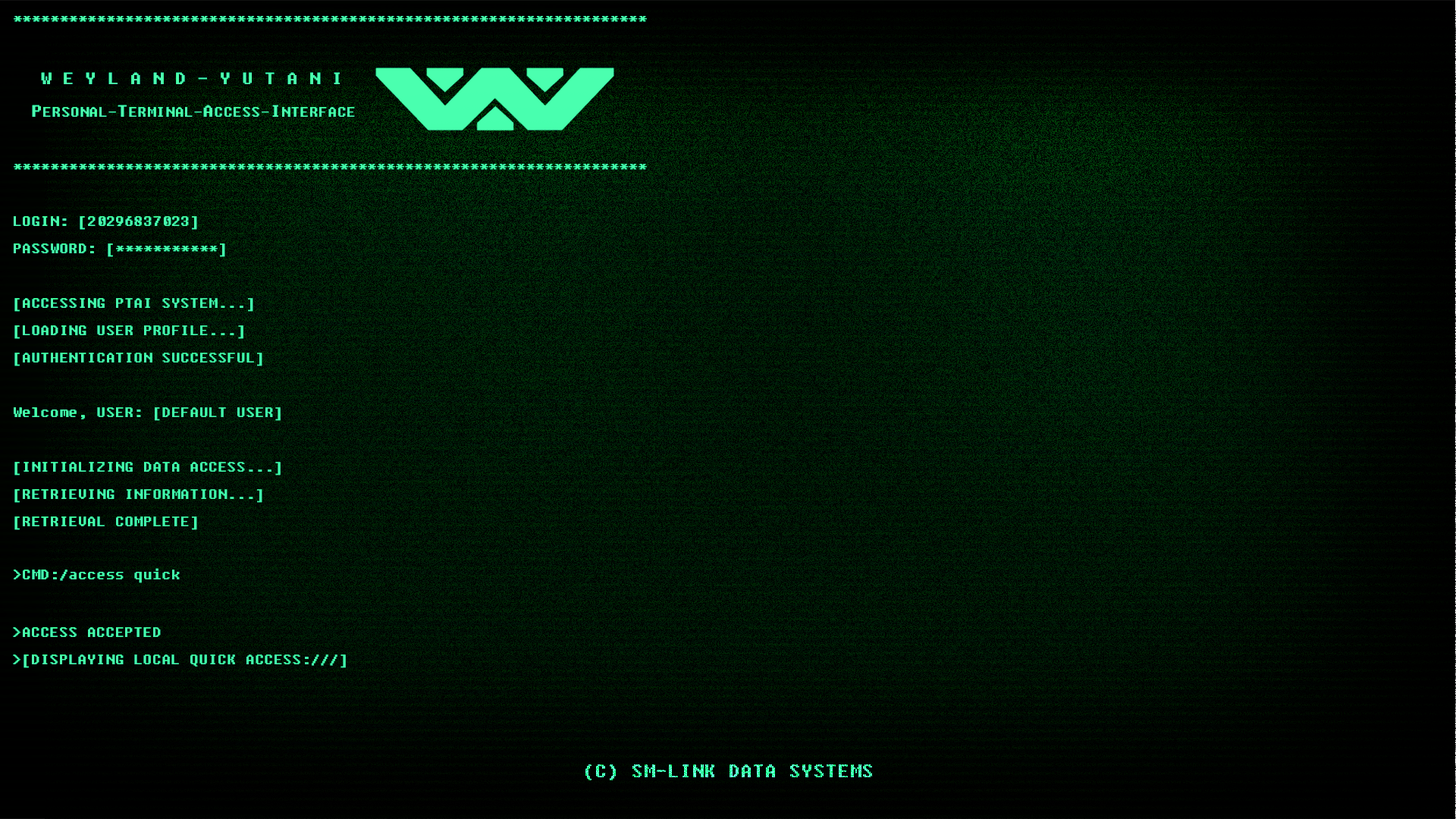
<style>
.page{position:relative;width:1456px;height:819px}
.page>*{position:absolute;margin:0}
.t1{font:17.3px "FixedsysExcelsiorIIIb";color:#40ffad;scale:1.08 1}
.t2{font:20.7px "FixedsysExcelsiorIIIb";color:#40ffad;scale:1.08 1}
.t3{font:22.5px "FixedsysExcelsiorIIIb";scale:1.08 1}
</style>
<div class="page">
<p class="t1" style="left:14px;top:16px;width:633px;height:514px">********************************************************************<br>                                            <br>   <span class="t2">W E Y L A N D - Y U T A N I           <br>  P</span>ERSONAL-<span class="t2">T</span>ERMINAL-<span class="t2">A</span>CCESS-<span class="t2">I</span>NTERFACE      <br>                                             <br>********************************************************************<br><br>LOGIN: [20296837023]<br>PASSWORD: [***********]<br><br>[ACCESSING PTAI SYSTEM...]<br>[LOADING USER PROFILE...]<br>[AUTHENTICATION SUCCESSFUL]<br><br>Welcome, USER: [DEFAULT USER]<br><br>[INITIALIZING DATA ACCESS...]<br>[RETRIEVING INFORMATION...]<br>[RETRIEVAL COMPLETE]</p>
<p class="t1" style="left:14px;top:568px;width:166px;height:15px">&gt;CMD:/access quick</p>
<p class="t1" style="left:13px;top:627px;width:333px;height:41px">&gt;ACCESS ACCEPTED  <br>&gt;[DISPLAYING LOCAL QUICK ACCESS:///]</p>
<p class="t3" style="left:585px;top:764px;width:287px;height:16px">(C) SM-LINK DATA SYSTEMS</p>
</div>
